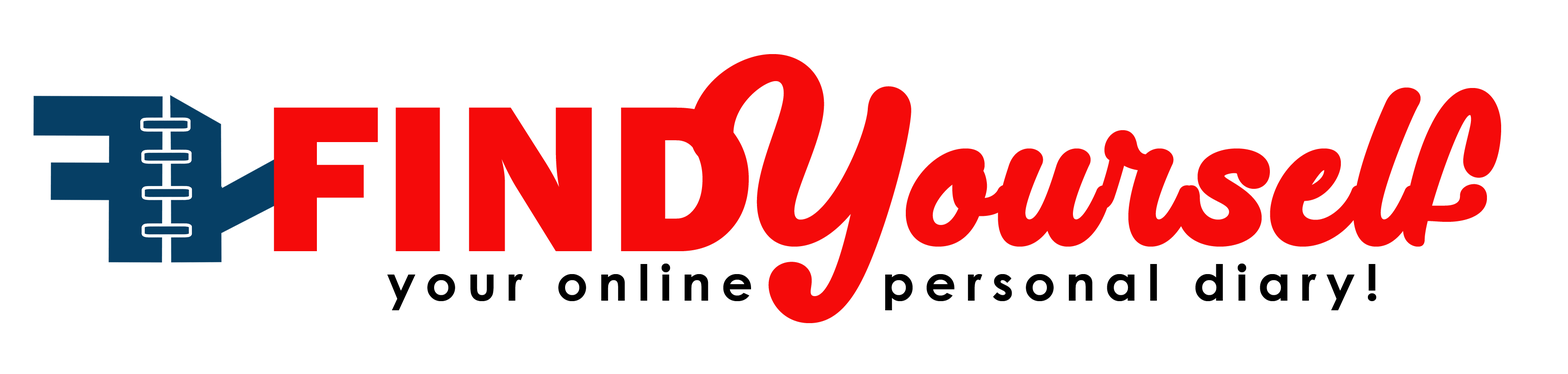
<style>
.page{position:relative;width:1568px;height:374px;background:#ffffff}
.page>*{position:absolute;margin:0}
.t1{font:215.3px "LucytheCat-Regular";letter-spacing:0.02em;color:#f50a0a}
.t2{font:215.3px "FranklinGothic-Heavy";letter-spacing:0.02em;color:#f50a0a}
.t3{font:49.6px "CenturyGothic-Bold";letter-spacing:0.2em;color:#000000}
</style>
<div class="page">
<p class="t1" style="left:690px;top:54px;width:811px;height:269px">Yourself</p>
<p class="t2" style="left:274px;top:107px;width:475px;height:144px">FIND</p>
<p class="t3" style="left:387px;top:263px;width:990px;height:47px">your online     personal diary!</p>
</div>
